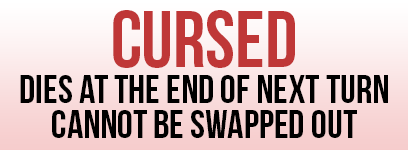
<style>
.page{position:relative;width:408px;height:150px}
.page>*{position:absolute;margin:0}
.t1{font:80px "BebasNeue";color:#bf3838}
.t2{font:40px "BebasNeue";color:#000000}
</style>
<div class="page">
<p class="t1" style="left:113px;top:10px;width:182px;height:58px">cursed</p>
<p class="t2" style="left:20px;top:75px;width:368px;height:28px">dies at the end of next turn</p>
<p class="t2" style="left:52px;top:110px;width:305px;height:28px">cannot be swapped out</p>
</div>
